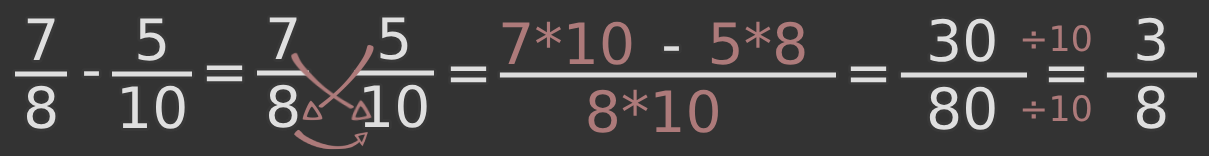
<style>
.page{position:relative;width:1209px;height:156px;background:#333333}
.page>*{position:absolute;margin:0}
.t1{font:56.9px "DejaVuSans";color:#dfdfdf}
.t2{font:56.9px "DejaVuSans";color:#ad7a7a}
.t3{font:35px "DejaVuSans";color:#ad7a7a}
.t4{font:56.4px "DejaVuSans";color:#dfdfdf}
</style>
<div class="page">
<p class="t1" style="left:268px;top:17px;width:30px;height:111px;text-align:center">7<br>8</p>
<p class="t1" style="left:364px;top:17px;width:63px;height:111px;text-align:center">5<br>10</p>
<p class="t1" style="left:1136px;top:17px;width:30px;height:112px;text-align:center">3<br>8</p>
<p class="t1" style="left:26px;top:18px;width:30px;height:111px;text-align:center">7<br>8</p>
<p class="t1" style="left:122px;top:18px;width:63px;height:111px;text-align:center">5<br>10</p>
<p class="t2" style="left:502px;top:21px;width:303px;height:112px;text-align:center">7*10    5*8<br>8*10</p>
<p class="t1" style="left:929px;top:18px;width:66px;height:112px;text-align:center">30<br>80</p>
<p class="t3" style="left:1022px;top:25px;width:69px;height:27px">÷10</p>
<p class="t4" style="left:664px;top:46px;width:15px;height:5px">-</p>
<p class="t4" style="left:206px;top:65px;width:37px;height:17px">=</p>
<p class="t4" style="left:84px;top:71px;width:15px;height:5px">-</p>
<p class="t4" style="left:450px;top:66px;width:37px;height:17px">=</p>
<p class="t4" style="left:850px;top:66px;width:37px;height:17px">=</p>
<p class="t4" style="left:1048px;top:66px;width:37px;height:17px">=</p>
<p class="t3" style="left:1022px;top:95px;width:69px;height:27px">÷10</p>
</div>
